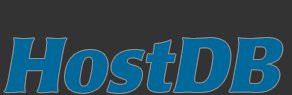
<style>
.page{position:relative;width:292px;height:95px;background:#333333}
.page>*{position:absolute;margin:0}
.t1{font:75px "PopplLaudatio-Bold";color:#00699b;font-style:italic}
</style>
<div class="page">
<p class="t1" style="left:4px;top:37px;width:279px;height:56px">HostDB</p>
</div>
